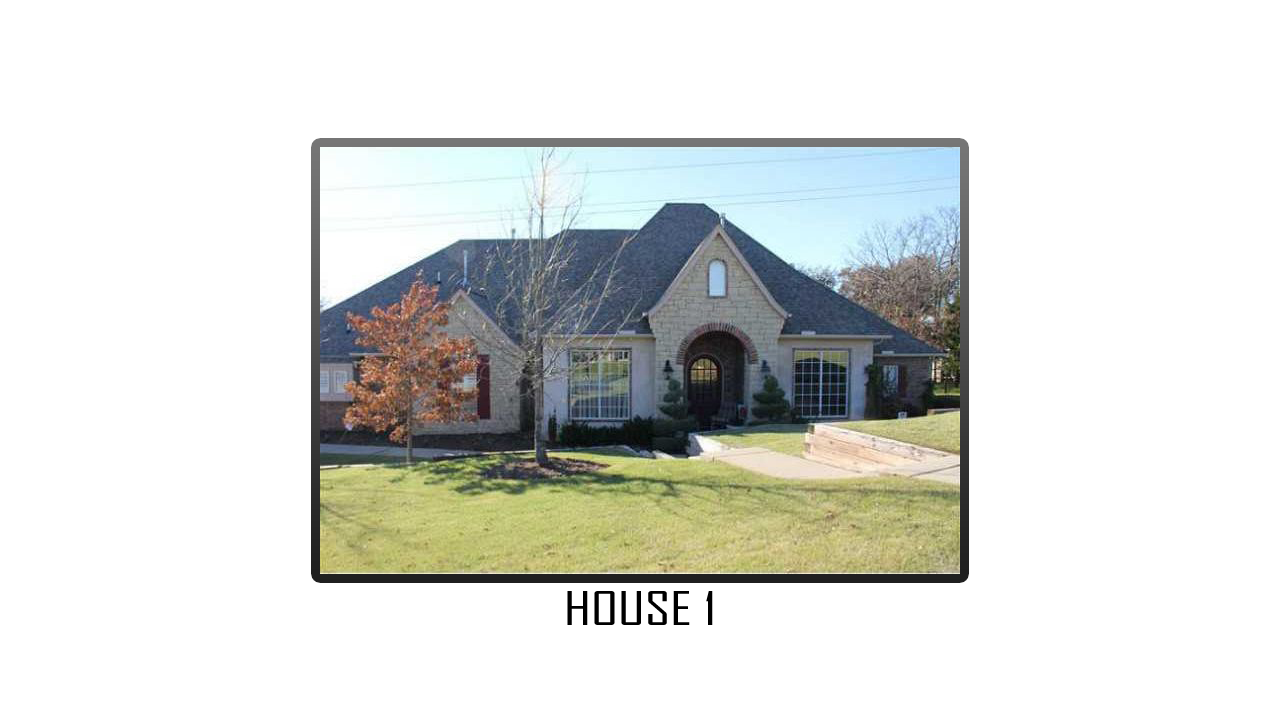
<style>
.page{position:relative;width:1280px;height:720px;background:#ffffff}
.page>*{position:absolute;margin:0}
.t1{font:44.5px "AgencyFB-Reg";color:#000000;scale:1.37 1}
</style>
<div class="page">
<p class="t1" style="left:567px;top:591px;width:146px;height:34px">HOUSE 1</p>
</div>
